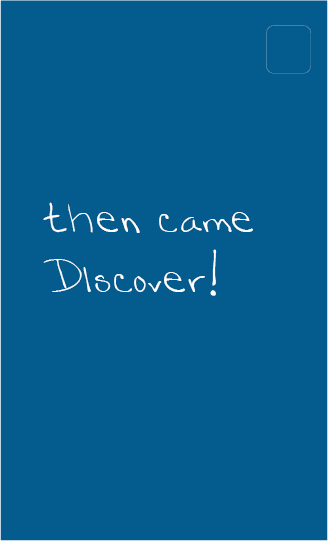
<style>
.page{position:relative;width:328px;height:541px;background:#045b8d}
.page>*{position:absolute;margin:0}
.t1{font:40px/60px "Katyhandwriting1-Medium";color:#ffffff}
</style>
<div class="page">
<p class="t1" style="left:43px;top:202px;width:210px;height:94px">then came<br>DIscover!</p>
</div>
